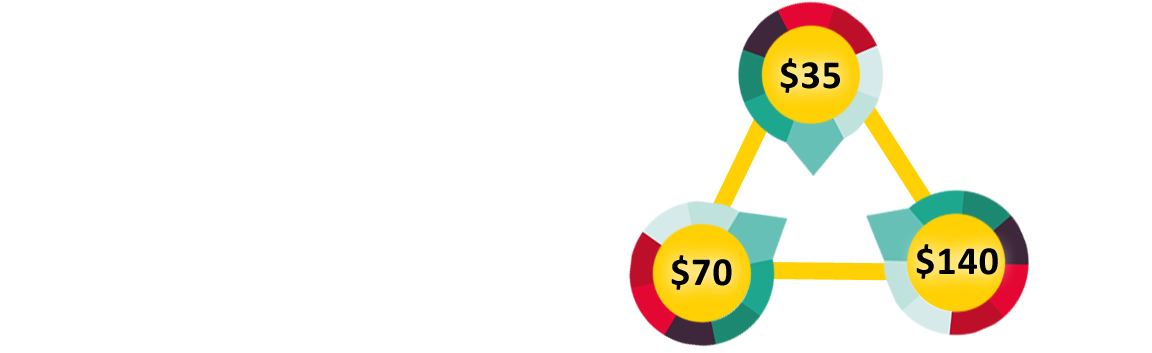
<style>
.page{position:relative;width:1152px;height:353px;background:#ffffff}
.page>*{position:absolute;margin:0}
.t1{font:40px "Calibri-Bold";letter-spacing:0.025em;color:#000000}
</style>
<div class="page">
<p class="t1" style="left:780px;top:58px;width:60px;height:35px">$35</p>
<p class="t1" style="left:916px;top:244px;width:82px;height:35px">$140</p>
<p class="t1" style="left:671px;top:255px;width:61px;height:35px">$70</p>
</div>
